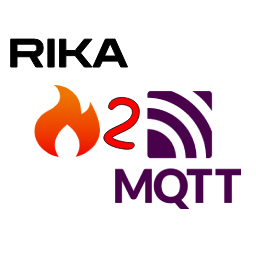
<style>
.page{position:relative;width:256px;height:256px;background:#ffffff}
.page>*{position:absolute;margin:0}
.t1{font:39px "ZenDots-Regular";color:#000000}
.t2{font:71.1px "Sniglet-Regular";color:#ff0000;scale:0.96 1}
</style>
<div class="page">
<p class="t1" style="left:9px;top:38px;width:120px;height:30px">RIKA</p>
<p class="t2" style="left:103px;top:96px;width:37px;height:54px;rotate:12deg">2</p>
</div>
